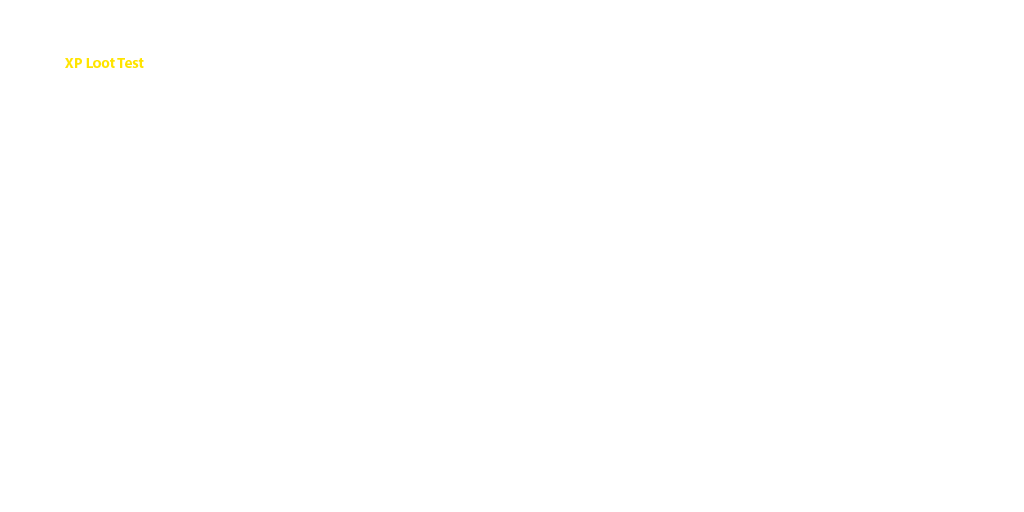
<style>
.page{position:relative;width:1024px;height:512px;background:#ffffff}
.page>*{position:absolute;margin:0}
.t1{font:14.7px "MyriadPro-Bold";color:#ffe400}
</style>
<div class="page">
<p class="t1" style="left:65px;top:58px;width:79px;height:10px">XP Loot Test</p>
</div>
